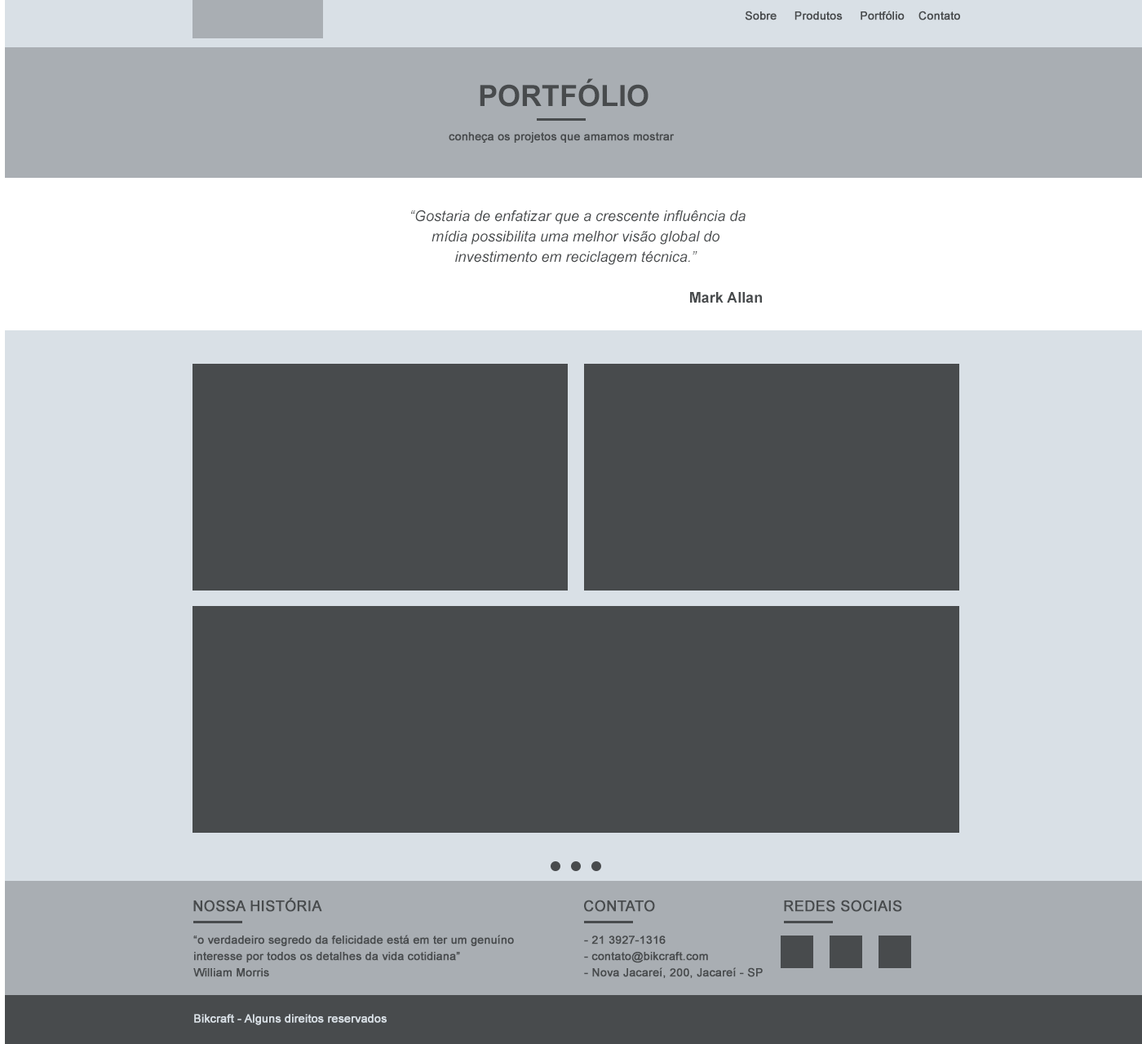
<style>
.page{position:relative;width:1142px;height:1044px;background:#484b4d}
.page>*{position:absolute;margin:0}
.t1{font:11.4px "ArialMT";color:#484b4d;font-weight:bold}
.t2{font:29.4px "Arial-BoldMT";color:#484b4d;text-transform:uppercase}
.t3{font:14.7px/20.4px "Arial-ItalicMT";color:#484b4d}
.t4{font:14.7px/20.4px "Arial-BoldMT";color:#484b4d}
.t5{font:14.7px "ArialMT";color:#484b4d;text-transform:uppercase;font-weight:bold}
.t6{font:11.4px/16.3px "ArialMT";color:#484b4d;font-weight:bold}
.t7{font:11.4px "ArialMT";color:#d9e0e6;font-weight:bold}
</style>
<div class="page">
<p class="t1" style="left:745px;top:11px;width:215px;height:9px">Sobre     Produtos     Portfólio    Contato</p>
<p class="t2" style="left:480px;top:78px;width:169px;height:29px">portfólio</p>
<p class="t1" style="left:449px;top:132px;width:226px;height:11px">conheça os projetos que amamos mostrar</p>
<p class="t3" style="left:411px;top:210px;width:351px;height:93px;text-align:center">“Gostaria de enfatizar que a crescente influência da mídia possibilita uma melhor visão global do investimento em reciclagem técnica.”<br><br><span class="t4">Mark Allan</span></p>
<p class="t5" style="left:193px;top:897px;width:129px;height:15px">Nossa história</p>
<p class="t5" style="left:584px;top:900px;width:71px;height:12px">Contato</p>
<p class="t5" style="left:784px;top:900px;width:118px;height:12px">Redes sociais</p>
<p class="t6" style="left:193px;top:935px;width:321px;height:42px">“o verdadeiro segredo da felicidade está em ter um genuíno interesse por todos os detalhes da vida cotidiana”<br>William Morris</p>
<p class="t6" style="left:584px;top:936px;width:179px;height:43px">- 21 3927-1316<br>- contato@bikcraft.com<br>- Nova Jacareí, 200, Jacareí - SP</p>
<p class="t7" style="left:194px;top:1014px;width:193px;height:11px">Bikcraft - Alguns direitos reservados</p>
</div>
